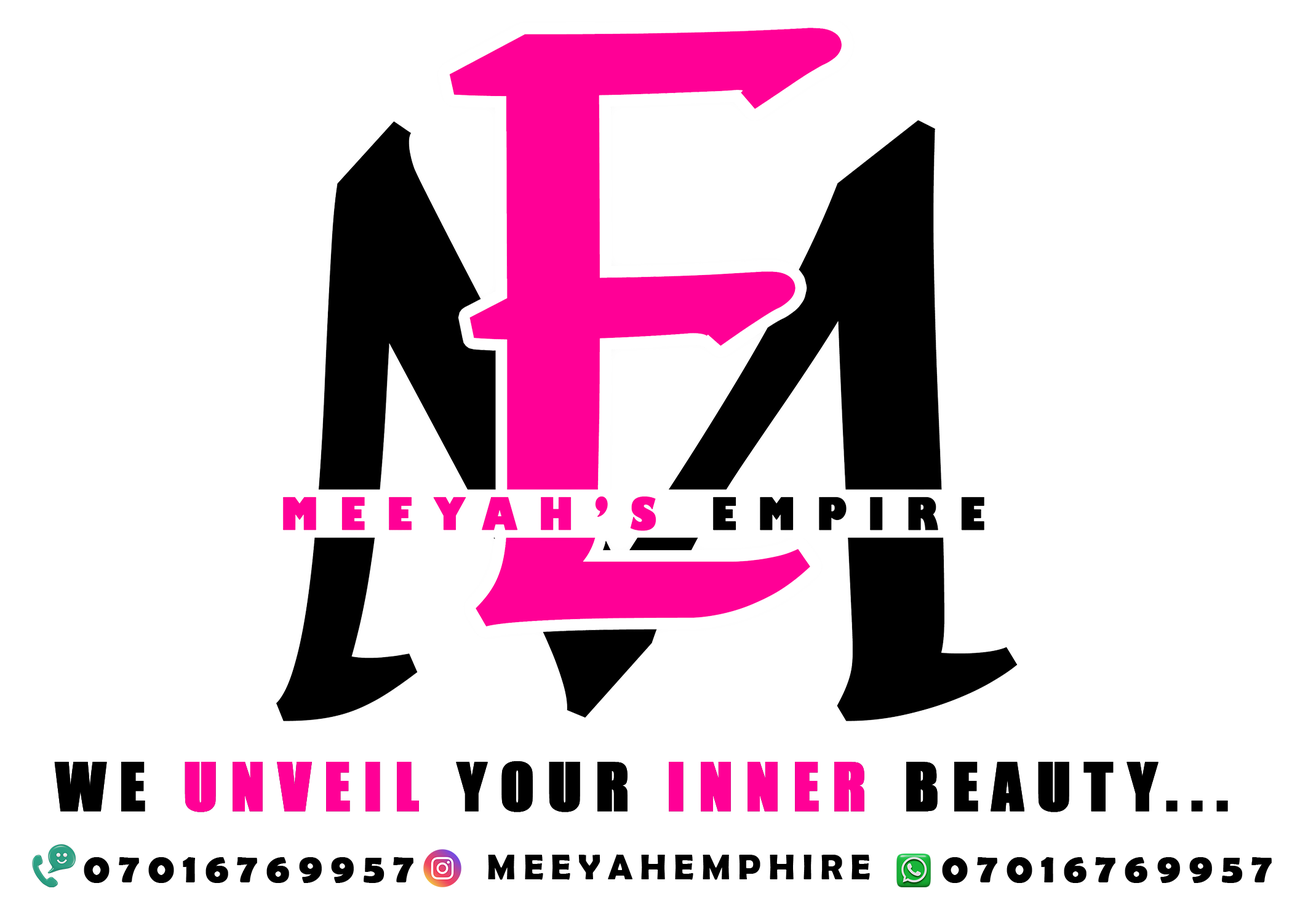
<style>
.page{position:relative;width:1292px;height:923px;background:#ffffff}
.page>*{position:absolute;margin:0}
.t1{font:61.4px "Impact";letter-spacing:0.2em;color:#000000;text-transform:uppercase;font-weight:bold}
.t2{font:61.4px "Impact";letter-spacing:0.2em;color:#ff0096;text-transform:uppercase;font-weight:bold}
.t3{font:41px "BerlinSansFBDemi-Bold";letter-spacing:0.2em;color:#000000;text-transform:uppercase;font-weight:bold}
.t4{font:35.9px "BerlinSansFBDemi-Bold";letter-spacing:0.2em;color:#000000;text-transform:uppercase}
</style>
<div class="page">
<p class="t1" style="left:54px;top:761px;width:1174px;height:51px">We <span class="t2">Unveil</span> your <span class="t2">inner </span>beauty...</p>
<p class="t3" style="left:84px;top:857px;width:329px;height:26px">07016769957</p>
<p class="t4" style="left:488px;top:854px;width:382px;height:26px">meeyahemphire</p>
<p class="t3" style="left:942px;top:857px;width:330px;height:26px">07016769957</p>
</div>
